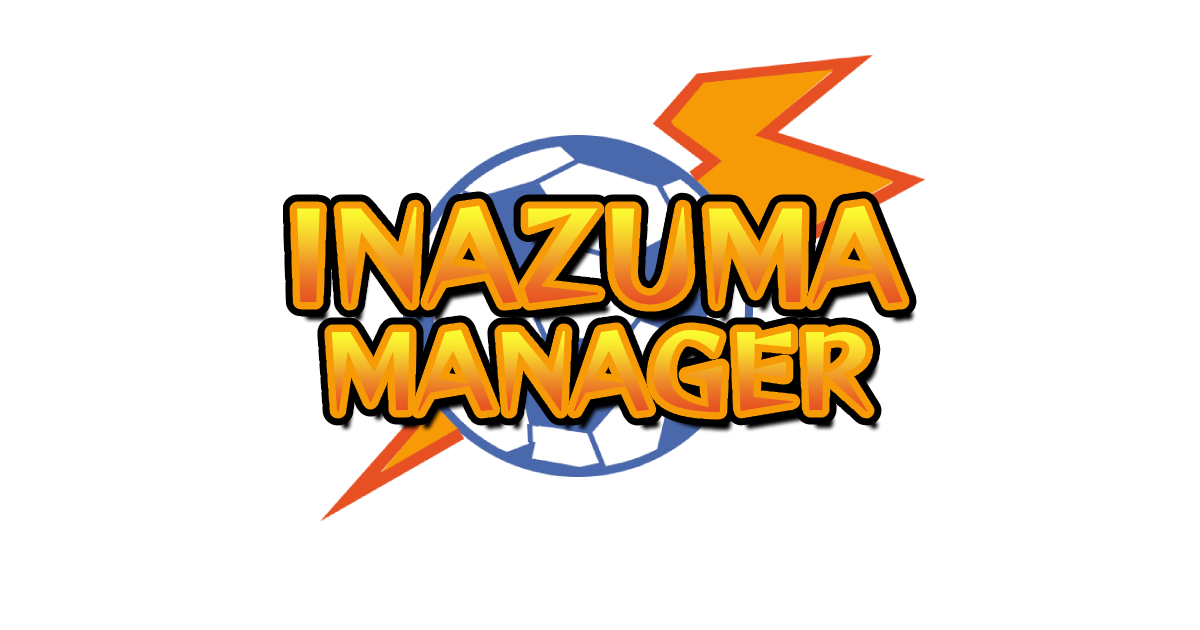
<style>
.page{position:relative;width:1200px;height:630px;background:#ffffff}
.page>*{position:absolute;margin:0}
.t1{font:120px "ReggaeStd-B"}
.t2{font:100px "ReggaeStd-B"}
</style>
<div class="page">
<p class="t1" style="left:297px;top:205px;width:606px;height:100px">INAZUMA</p>
<p class="t2" style="left:331px;top:329px;width:537px;height:83px">MANAGER</p>
</div>
